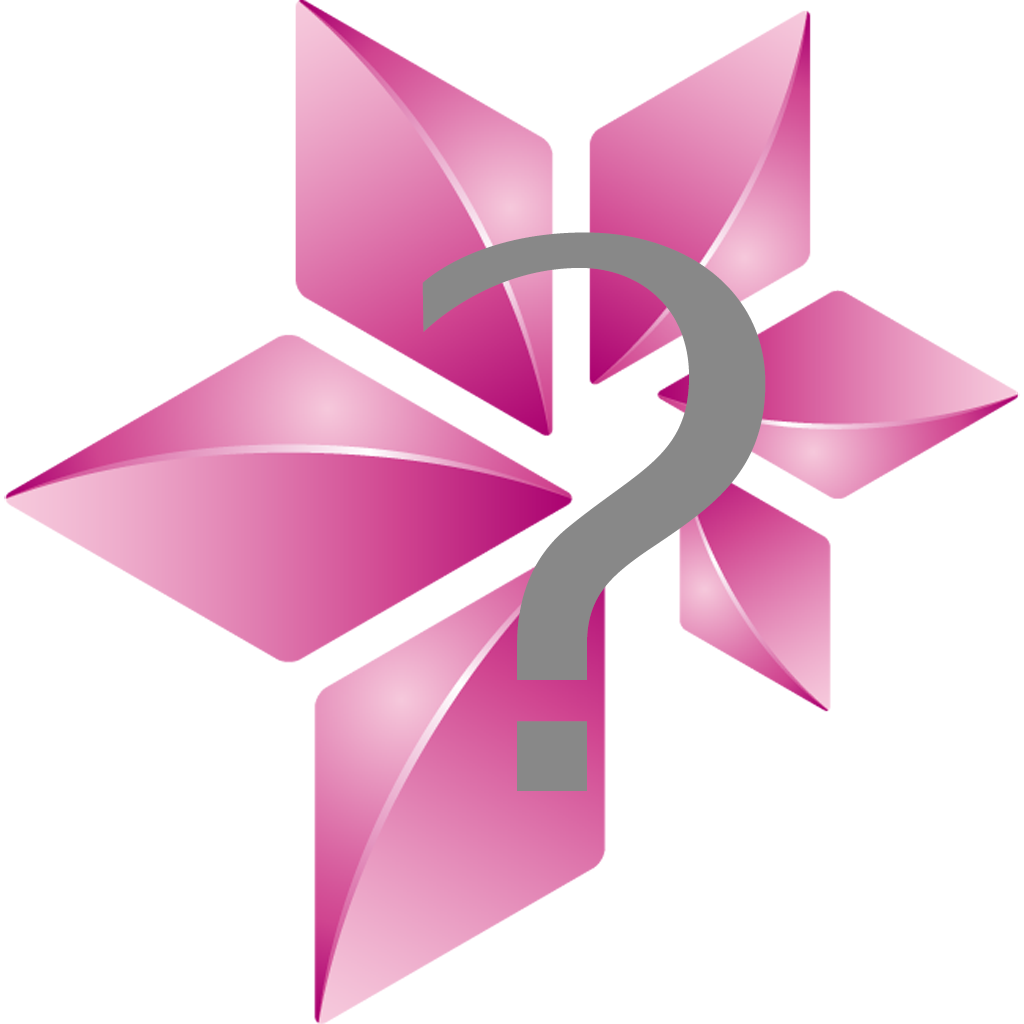
<style>
.page{position:relative;width:1024px;height:1024px;background:#ffffff}
.page>*{position:absolute;margin:0}
.t1{font:800px "Statoil-DisplayBold";color:#888888}
</style>
<div class="page">
<p class="t1" style="left:422px;top:232px;width:344px;height:559px">?</p>
</div>
